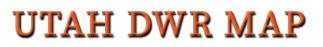
<style>
.page{position:relative;width:323px;height:47px;background:#ffffff}
.page>*{position:absolute;margin:0}
.t1{font:36px "SourceSerif4-Regular";letter-spacing:0.025em;font-weight:bold}
</style>
<div class="page">
<p class="t1" style="left:12px;top:10px;width:293px;height:26px">UTAH DWR MAP</p>
</div>
